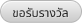
<style>
.page{position:relative;width:82px;height:23px}
.page>*{position:absolute;margin:0}
.t1{font:12px "NotoSansThai-Regular";color:#272727}
</style>
<div class="page">
<p class="t1" style="left:13px;top:7px;width:55px;height:10px">ขอรับรางวัล</p>
</div>
